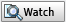
<style>
.page{position:relative;width:66px;height:22px}
.page>*{position:absolute;margin:0}
.t1{font:11.2px "Tahoma";letter-spacing:0.1em;color:#000000;scale:0.86 1}
</style>
<div class="page">
<p class="t1" style="left:23px;top:7px;width:31px;height:9px">Watch</p>
</div>
